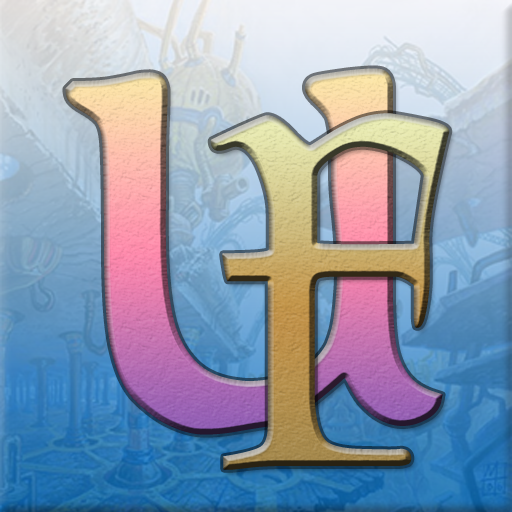
<style>
.page{position:relative;width:512px;height:512px}
.page>*{position:absolute;margin:0}
.t1{font:500px "Magic:theGathering";letter-spacing:-0.08em;font-weight:bold}
.t2{font:500px "Magic:theGathering";letter-spacing:-0.08em;text-transform:uppercase;font-weight:bold}
</style>
<div class="page">
<p class="t1" style="left:65px;top:68px;width:378px;height:367px">U</p>
<p class="t2" style="left:210px;top:113px;width:240px;height:357px">F</p>
</div>
